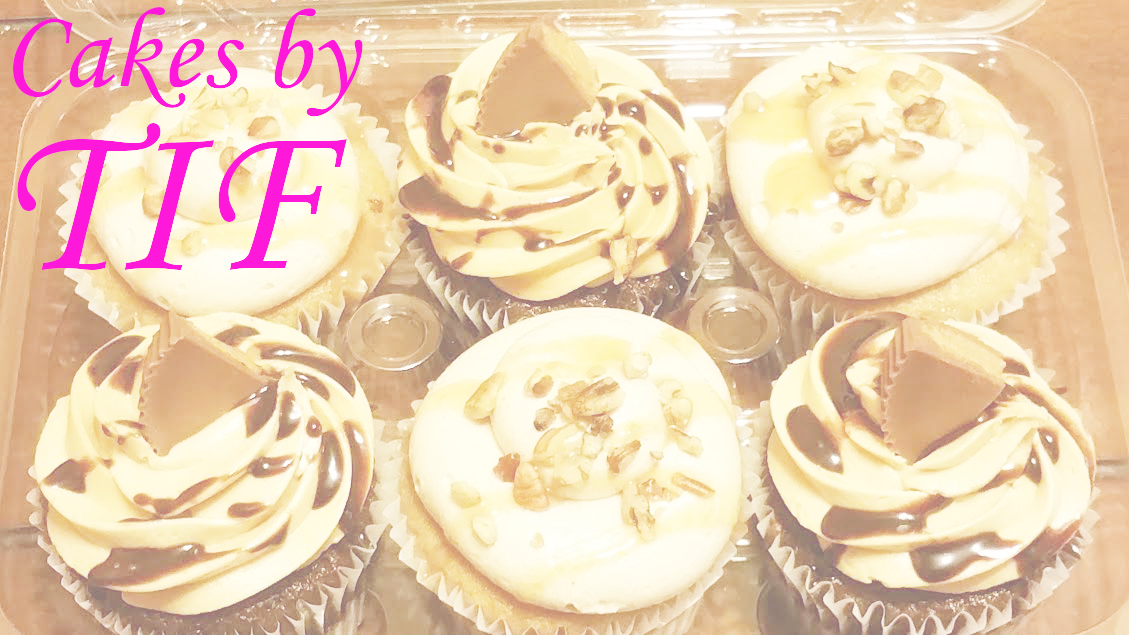
<style>
.page{position:relative;width:1129px;height:635px}
.page>*{position:absolute;margin:0}
.t1{font:115px "MonotypeCorsiva";color:#fd18da}
.t2{font:220px "MonotypeCorsiva";color:#fd18da}
</style>
<div class="page">
<p class="t1" style="left:13px;top:7px;width:350px;height:110px">Cakes by</p>
<p class="t2" style="left:17px;top:123px;width:330px;height:147px">TIF</p>
</div>
